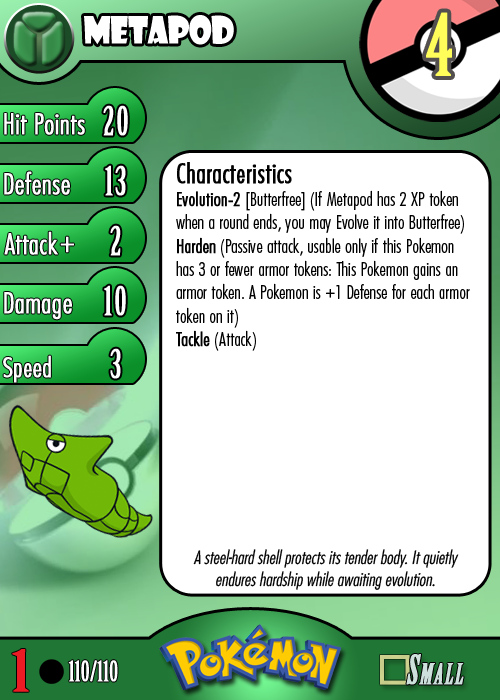
<style>
.page{position:relative;width:500px;height:700px;background:#ffffff}
.page>*{position:absolute;margin:0}
.t1{font:36.7px "ShowcardGothic-Reg";letter-spacing:-0.025em;color:#ffffff;scale:0.91 1}
.t2{font:83.3px "BirchStd";letter-spacing:0.025em;color:#fffd59;font-weight:bold}
.t3{font:27.8px "Futura-CondensedLight";color:#ffffff;font-weight:bold}
.t4{font:38.9px "BirchStd";letter-spacing:0.035em;color:#ffffff;font-weight:bold}
.t5{font:19.4px "FuturaCondensedBQ-Light";color:#010101}
.t6{font:27.8px "FuturaCondensedBQ-Light";color:#010101;font-weight:bold}
.t7{font:19.4px "FuturaCondensedBQ-Light";color:#010101;font-weight:bold}
.t8{font:30.6px "Futura-CondensedLight";color:#ffffff;font-weight:bold}
.t9{font:27.8px "FuturaCondensedBQ-Light";color:#ffffff;font-weight:bold}
.t10{font:18.1px "Futura-CondensedLight";color:#010101;font-style:italic}
.t11{font:55.6px "BirchStd";color:#ed1c24;font-weight:bold;scale:1.5 1}
.t12{font:27.8px "BirchStd";color:#ffffff;font-weight:bold}
</style>
<div class="page">
<p class="t1" style="left:84px;top:15px;width:150px;height:30px">metapod</p>
<p class="t2" style="left:426px;top:12px;width:26px;height:64px">4</p>
<p class="t3" style="left:4px;top:113px;width:81px;height:22px">Hit Points</p>
<p class="t4" style="left:103px;top:105px;width:25px;height:31px">20</p>
<p class="t3" style="left:4px;top:171px;width:66px;height:24px">Defense</p>
<p class="t4" style="left:105px;top:165px;width:21px;height:31px">13</p>
<p class="t5" style="left:176px;top:162px;width:294px;height:189px"><span class="t6">Characteristics<br></span><span class="t7">Evolution-2 </span>[Butterfree] (If Metapod has 2 XP token when a round ends, you may Evolve it into Butterfree)<br><span class="t7">Harden</span> (Passive attack, usable only if this Pokemon has 3 or fewer armor tokens: This Pokemon gains an armor token. A Pokemon is +1 Defense for each armor token on it)<br><span class="t7">Tackle</span> (Attack)</p>
<p class="t3" style="left:4px;top:231px;width:54px;height:24px">Attack</p>
<p class="t4" style="left:110px;top:225px;width:11px;height:31px">2</p>
<p class="t8" style="left:60px;top:236px;width:14px;height:17px">+</p>
<p class="t3" style="left:4px;top:292px;width:68px;height:28px">Damage</p>
<p class="t4" style="left:104px;top:285px;width:22px;height:31px">10</p>
<p class="t4" style="left:110px;top:348px;width:11px;height:31px">3</p>
<p class="t9" style="left:3px;top:355px;width:48px;height:28px">Speed</p>
<p class="t10" style="left:193px;top:549px;width:266px;height:41px;text-align:center">A steel-hard shell protects its tender body. It quietly endures hardship while awaiting evolution.</p>
<p class="t11" style="left:12px;top:649px;width:17px;height:43px">1</p>
<p class="t12" style="left:68px;top:660px;width:50px;height:22px">110/110</p>
</div>
